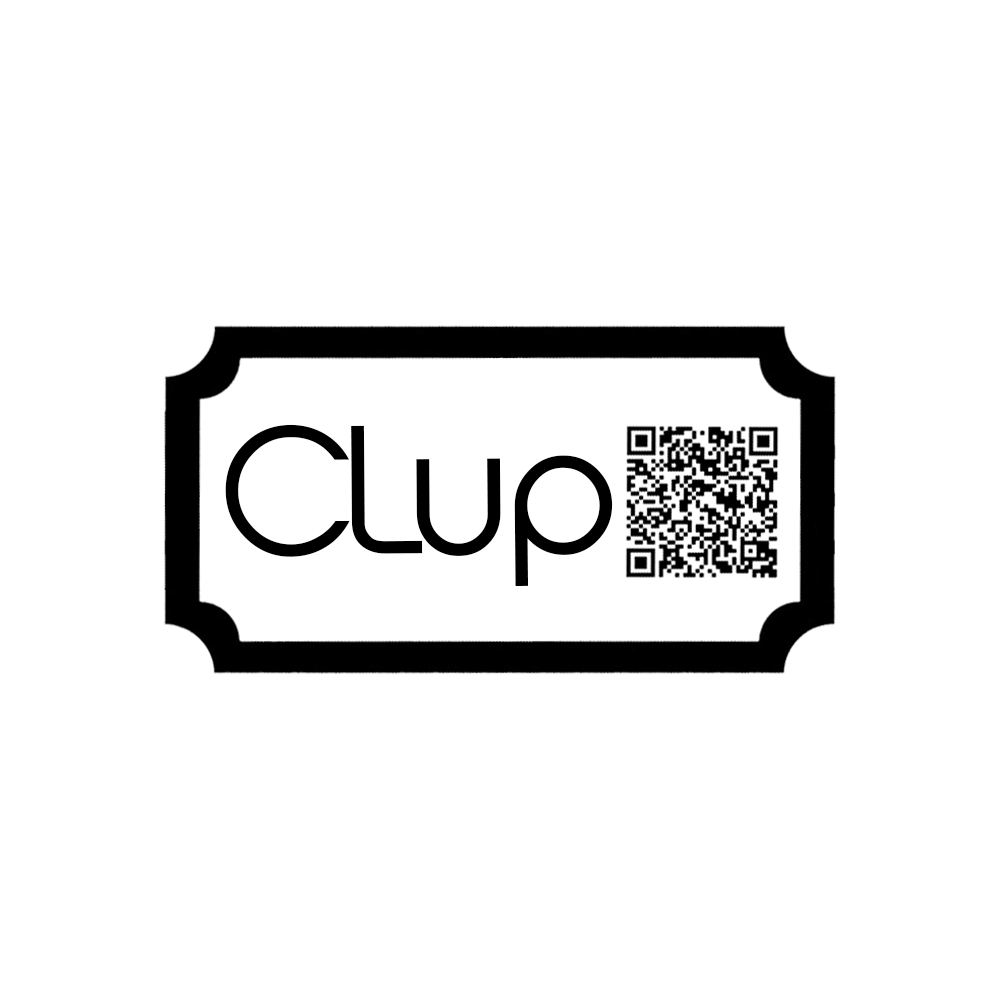
<style>
.page{position:relative;width:1000px;height:1000px;background:#ffffff}
.page>*{position:absolute;margin:0}
.t1{font:165.9px "AbeatbyKai";color:#000000}
</style>
<div class="page">
<p class="t1" style="left:225px;top:424px;width:388px;height:162px">CLup</p>
</div>
